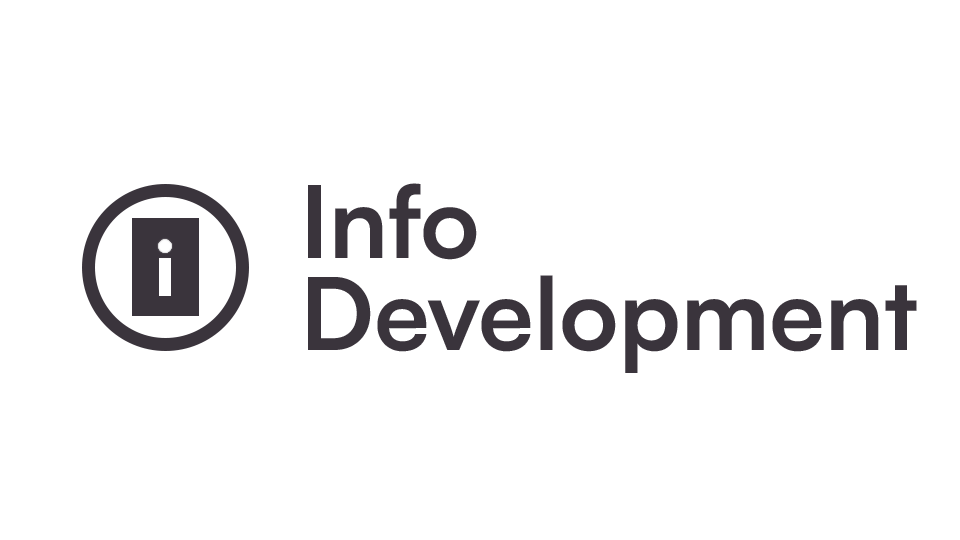
<style>
.page{position:relative;width:960px;height:540px;background:#ffffff}
.page>*{position:absolute;margin:0}
.t1{font:100px/91.7px "SatoshiVariable-Bold";color:#3a343c}
</style>
<div class="page">
<p class="t1" style="left:308px;top:183px;width:609px;height:190px">Info<br>Development</p>
</div>
